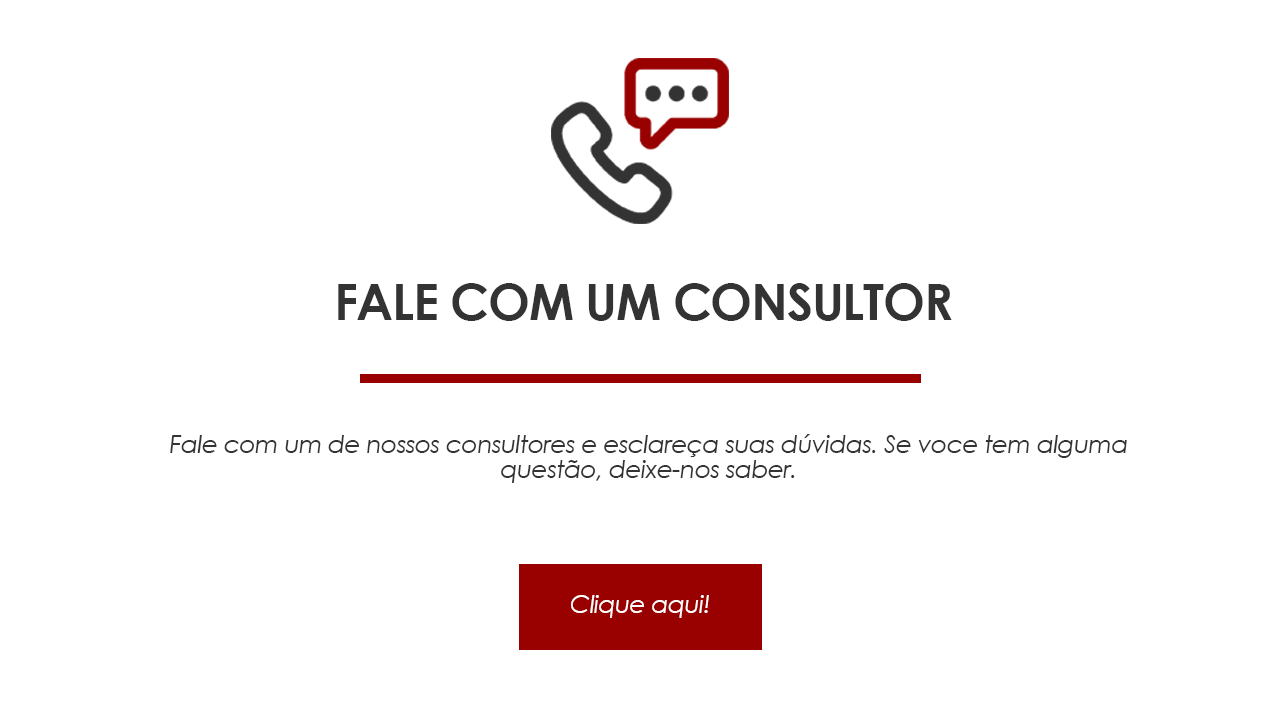
<style>
.page{position:relative;width:1280px;height:720px;background:#ffffff}
.page>*{position:absolute;margin:0}
.t1{font:50px "CenturyGothic-Bold";letter-spacing:-0.025em;color:#333333}
.t2{font:25px/25px "CenturyGothic-Italic";letter-spacing:-0.025em;color:#333333}
.t3{font:25px "CenturyGothic-Italic";letter-spacing:-0.025em;color:#ffffff}
</style>
<div class="page">
<p class="t1" style="left:338px;top:283px;width:614px;height:38px">FALE COM UM CONSULTOR</p>
<p class="t2" style="left:170px;top:434px;width:957px;height:49px;text-align:center">Fale com um de nossos consultores e esclareça suas dúvidas. Se voce tem alguma questão, deixe-nos saber.</p>
<p class="t3" style="left:571px;top:595px;width:138px;height:23px">Clique aqui!</p>
</div>
